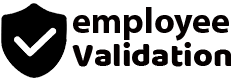
<style>
.page{position:relative;width:237px;height:80px;background:#ffffff}
.page>*{position:absolute;margin:0}
.t1{font:36px "MyriadPro-Bold";color:#050000}
.t2{font:34px "BalooBhai-Regular";color:#050000}
</style>
<div class="page">
<p class="t1" style="left:73px;top:7px;width:156px;height:34px">employee</p>
<p class="t2" style="left:72px;top:42px;width:159px;height:25px">Validation</p>
</div>
